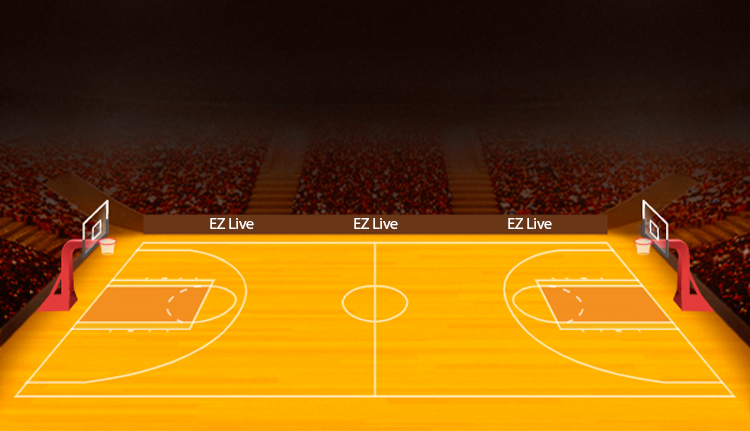
<style>
.page{position:relative;width:750px;height:431px}
.page>*{position:absolute;margin:0}
.t1{font:16px "MyriadPro-Regular";letter-spacing:-0.023em;color:#ffffff}
</style>
<div class="page">
<p class="t1" style="left:210px;top:218px;width:44px;height:11px">EZ Live</p>
<p class="t1" style="left:354px;top:218px;width:44px;height:11px">EZ Live</p>
<p class="t1" style="left:508px;top:218px;width:44px;height:11px">EZ Live</p>
</div>
